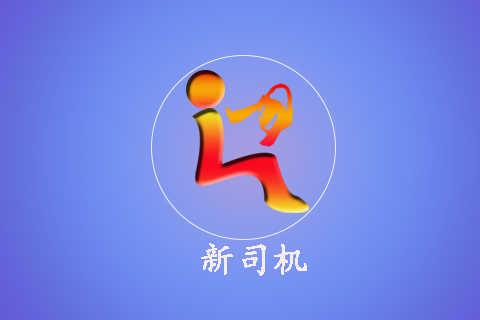
<style>
.page{position:relative;width:480px;height:320px}
.page>*{position:absolute;margin:0}
.t1{font:36px "¿¬Ìå";color:#f8ecef;font-weight:bold}
</style>
<div class="page">
<p class="t1" style="left:201px;top:243px;width:106px;height:33px">新司机</p>
</div>
